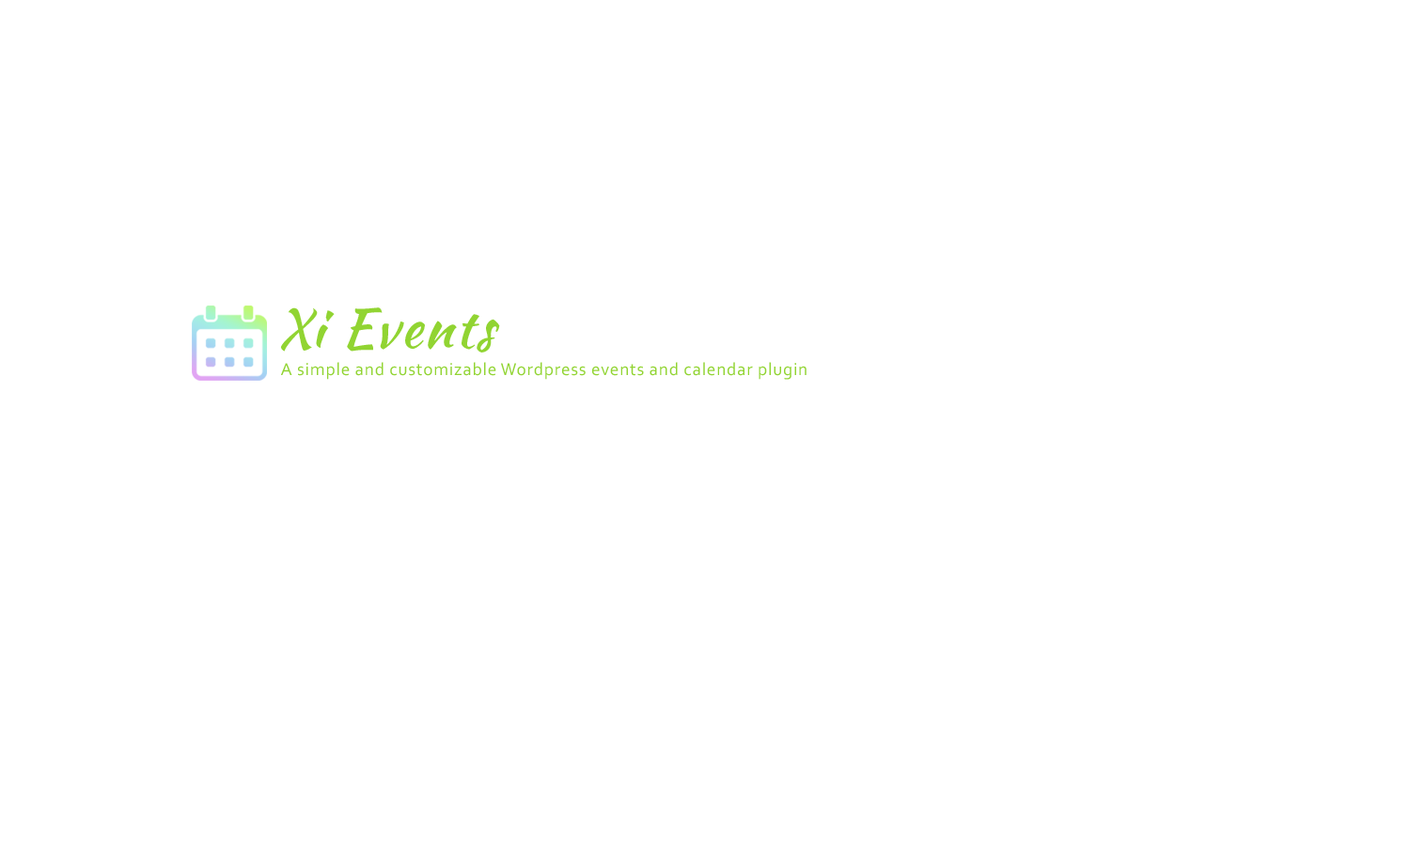
<style>
.page{position:relative;width:1410px;height:846px;background:#ffffff}
.page>*{position:absolute;margin:0}
.t1{font:53.3px "KaushanScript-Regular";letter-spacing:0.04em;color:#91d432}
.t2{font:18px "Corbel";letter-spacing:0.04em;color:#91d432}
</style>
<div class="page">
<p class="t1" style="left:280px;top:307px;width:220px;height:45px">Xi Events</p>
<p class="t2" style="left:281px;top:362px;width:525px;height:18px">A simple and customizable Wordpress events and calendar plugin</p>
</div>
